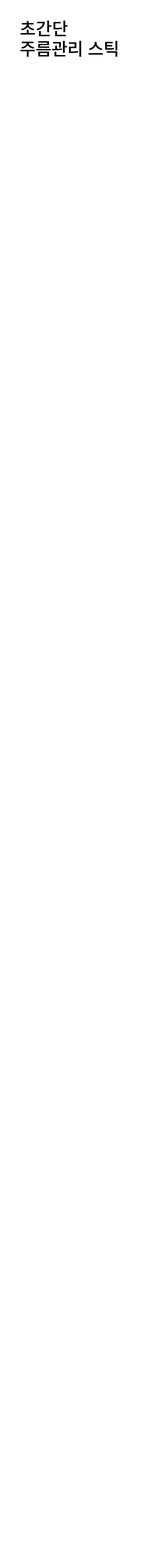
<style>
.page{position:relative;width:157px;height:1568px;background:#ffffff}
.page>*{position:absolute;margin:0}
.t1{font:17.6px "SourceHanSansKR-Medium";color:#000000}
.t2{font:17.6px "SourceHanSansKR-Medium";letter-spacing:-0.02em;color:#000000}
</style>
<div class="page">
<p class="t1" style="left:20px;top:21px;width:47px;height:15px">초간단</p>
<p class="t2" style="left:20px;top:41px;width:97px;height:16px">주름관리 스틱</p>
</div>
